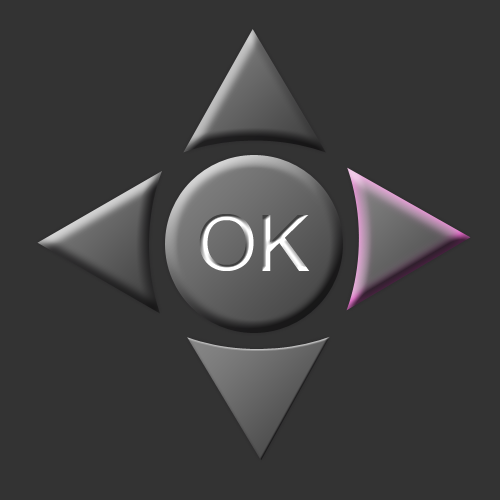
<style>
.page{position:relative;width:500px;height:500px;background:#333333}
.page>*{position:absolute;margin:0}
.t1{font:120px "BrowalliaNew"}
</style>
<div class="page">
<p class="t1" style="left:199px;top:214px;width:111px;height:57px">OK</p>
</div>
